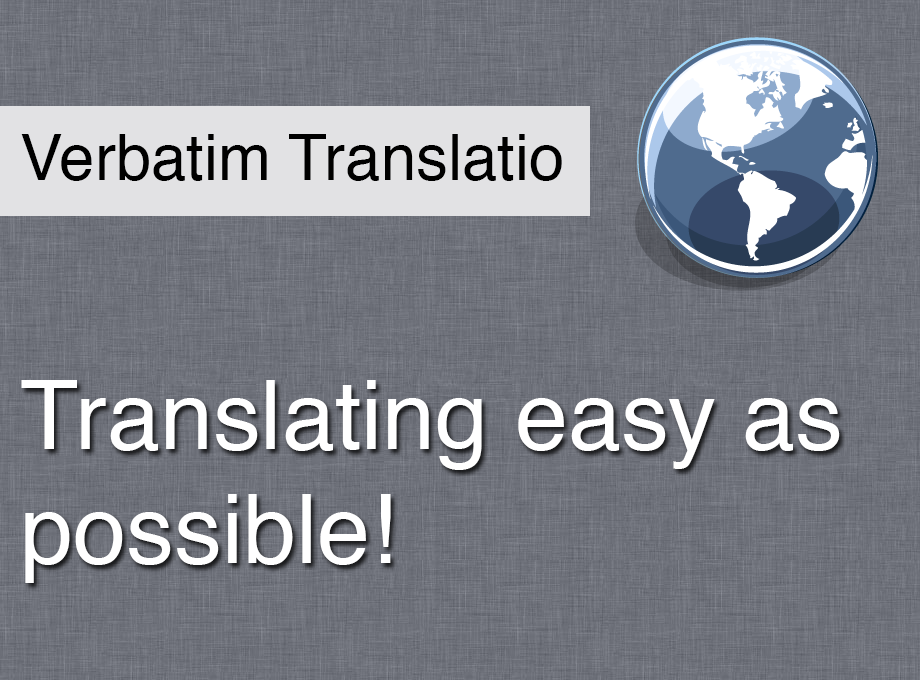
<style>
.page{position:relative;width:920px;height:680px}
.page>*{position:absolute;margin:0}
.t1{font:63.5px "Helvetica";color:#000000}
.t2{font:95.2px "Helvetica";color:#ffffff}
</style>
<div class="page">
<p class="t1" style="left:21px;top:134px;width:541px;height:47px">Verbatim Translatio</p>
<p class="t2" style="left:21px;top:380px;width:819px;height:203px">Translating easy as possible!</p>
</div>
